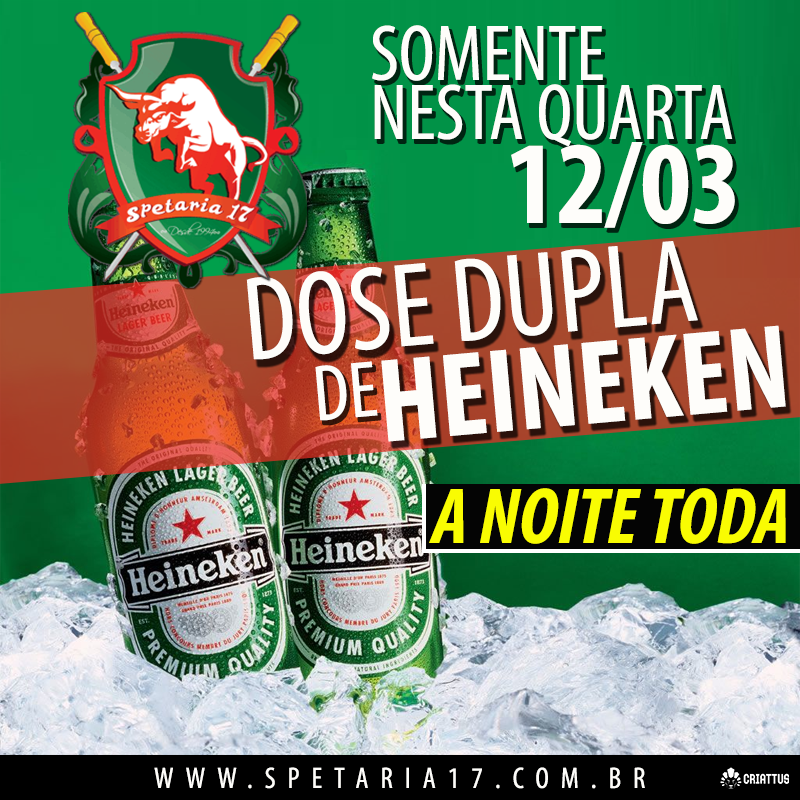
<style>
.page{position:relative;width:800px;height:800px}
.page>*{position:absolute;margin:0}
.t1{font:80px "MyriadPro-Cond";color:#fefdfa}
.t2{font:118.6px "MyriadPro-BoldCond";color:#fefdfa}
.t3{font:120px "MyriadPro-Cond";color:#fefdfa}
.t4{font:120px "MyriadPro-BoldCond";color:#fefdfa}
.t5{font:80px "MyriadPro-BoldCondIt";color:#f9fc02}
.t6{font:30px "MyriadPro-Cond";letter-spacing:0.4em;color:#fefdfa}
</style>
<div class="page">
<p class="t1" style="left:372px;top:25px;width:231px;height:56px">SOMENTE</p>
<p class="t1" style="left:374px;top:84px;width:359px;height:63px">NESTA QUARTA</p>
<p class="t2" style="left:511px;top:142px;width:224px;height:86px">12/03</p>
<p class="t3" style="left:246px;top:241px;width:452px;height:119px;rotate:-5deg">DOSE DUPLA</p>
<p class="t4" style="left:381px;top:325px;width:405px;height:117px;rotate:-5deg">HEINEKEN</p>
<p class="t1" style="left:315px;top:361px;width:63px;height:60px;rotate:-5deg">DE</p>
<p class="t5" style="left:429px;top:488px;width:357px;height:56px">A NOITE TODA</p>
<p class="t6" style="left:154px;top:767px;width:491px;height:22px">WWW.SPETARIA17.COM.BR</p>
</div>
